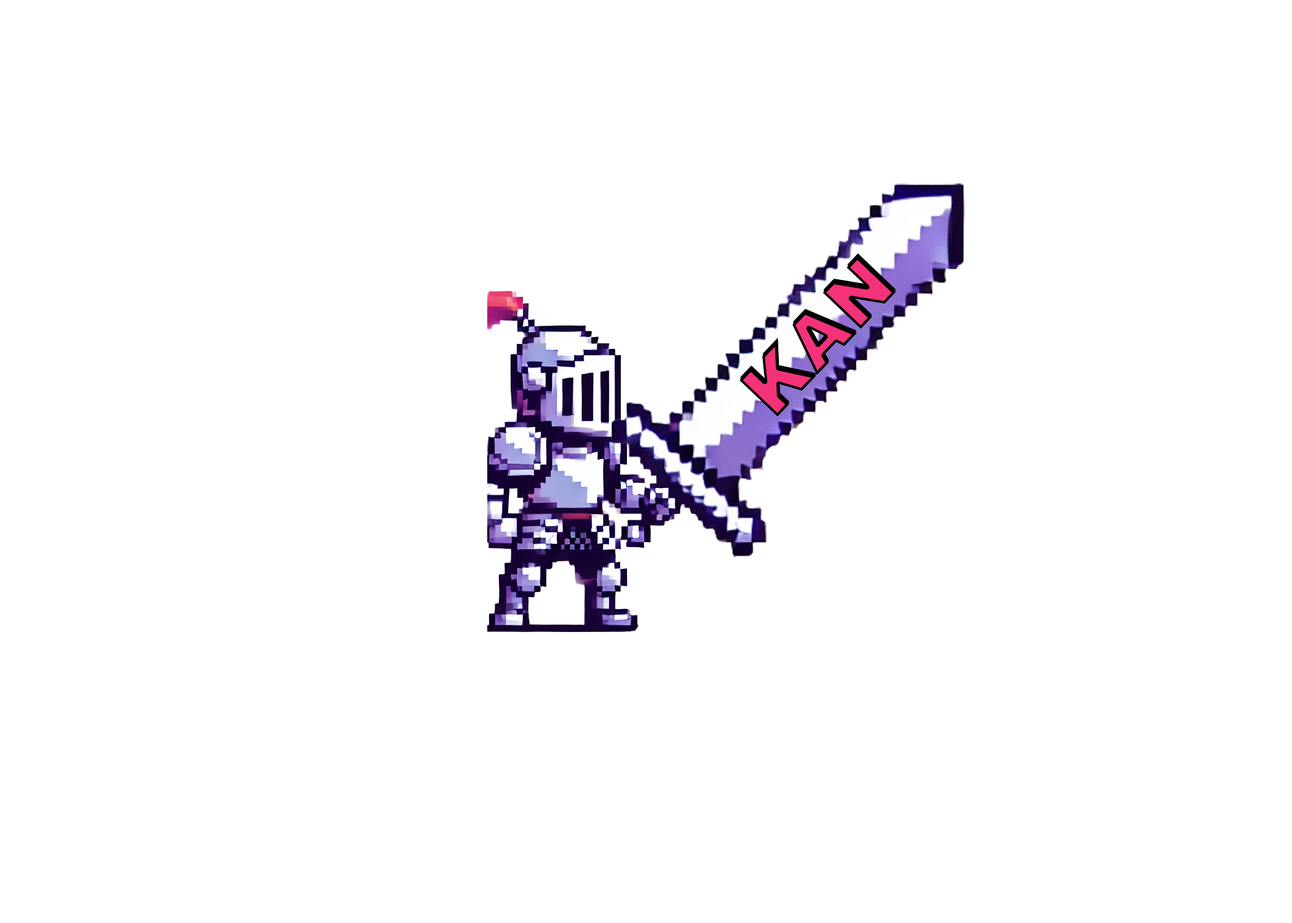
<style>
.page{position:relative;width:1292px;height:923px;background:#ffffff}
.page>*{position:absolute;margin:0}
.t1{font:72.8px "Arial-Black";letter-spacing:0.025em;color:#f3327a}
</style>
<div class="page">
<p class="t1" style="left:740px;top:256px;width:155px;height:161px;rotate:-46deg">KAN</p>
<p class="t1" style="left:740px;top:253px;width:156px;height:160px;rotate:-46deg">KAN</p>
<p class="t1" style="left:740px;top:254px;width:156px;height:161px;rotate:-46deg">KAN</p>
<p class="t1" style="left:740px;top:255px;width:156px;height:161px;rotate:-46deg">KAN</p>
</div>
